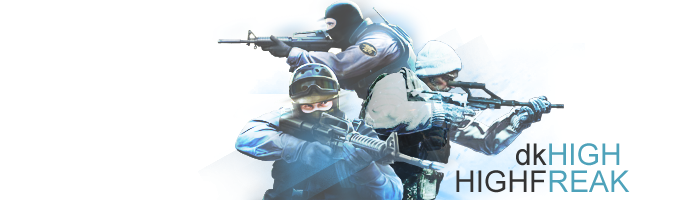
<style>
.page{position:relative;width:700px;height:200px;background:#ffffff}
.page>*{position:absolute;margin:0}
.t1{font:30px "ArialMT";color:#4ea2ba}
.t2{font:30px "ArialMT";color:#333333}
</style>
<div class="page">
<p class="t1" style="left:516px;top:143px;width:104px;height:23px"><span class="t2">dk</span>HIGH</p>
<p class="t2" style="left:456px;top:170px;width:174px;height:23px">HIGHF<span class="t1">REAK</span></p>
</div>
